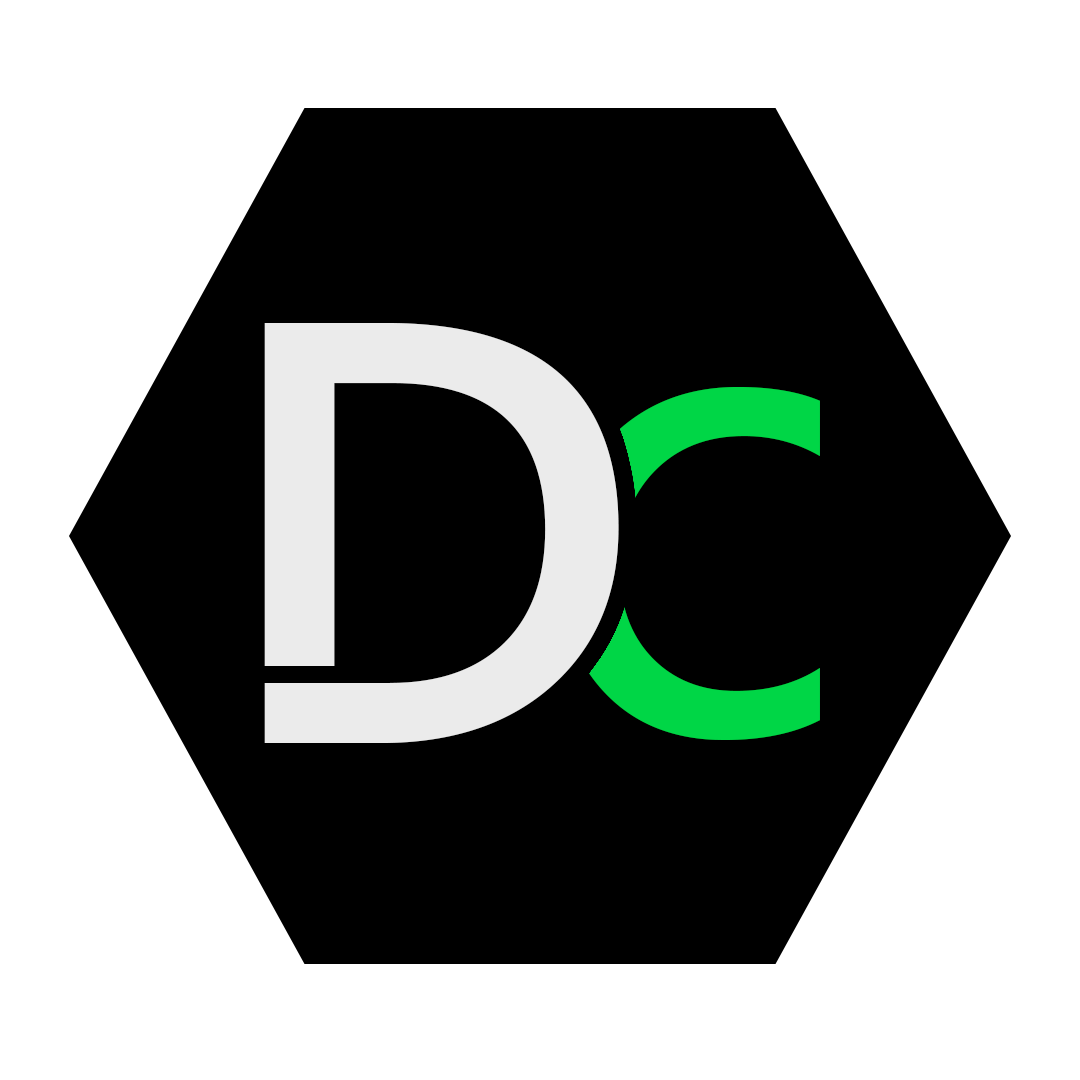
<style>
.page{position:relative;width:1080px;height:1080px;background:#ffffff}
.page>*{position:absolute;margin:0}
.t1{font:599.6px "SegoeUI-Semibold";color:#ebebeb}
.t2{font:487.1px "SegoeUI-Semibold";color:#00d646}
</style>
<div class="page">
<p class="t1" style="left:264px;top:323px;width:355px;height:420px">D</p>
<p class="t2" style="left:560px;top:387px;width:260px;height:353px">C</p>
</div>
